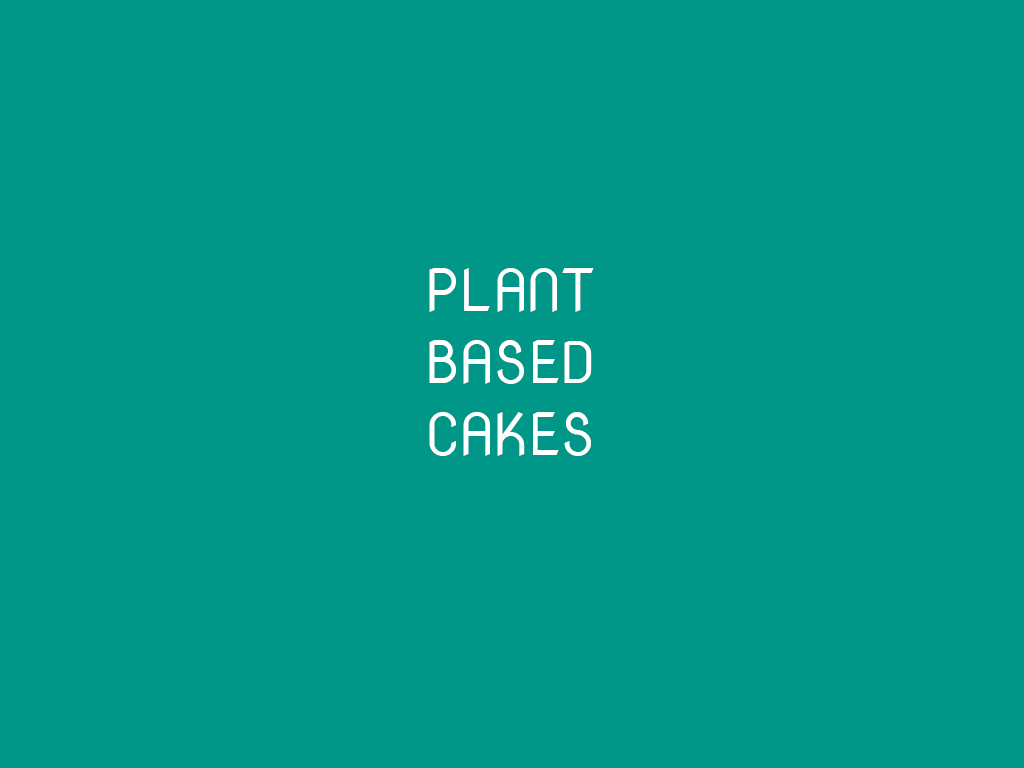
<style>
.page{position:relative;width:1024px;height:768px;background:#009688}
.page>*{position:absolute;margin:0}
.t1{font:60px "NovaMono";color:#ffffff}
</style>
<div class="page">
<p class="t1" style="left:429px;top:268px;width:165px;height:188px">PLANT<br>BASED <br>CAKES</p>
</div>
